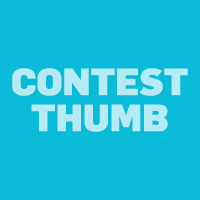
<style>
.page{position:relative;width:200px;height:200px;background:#09bad9}
.page>*{position:absolute;margin:0}
.t1{font:37.2px/36px "FlamaBlack";color:#b6eaf4}
</style>
<div class="page">
<p class="t1" style="left:12px;top:68px;width:176px;height:64px;text-align:center">CONTEST<br>THUMB</p>
</div>
